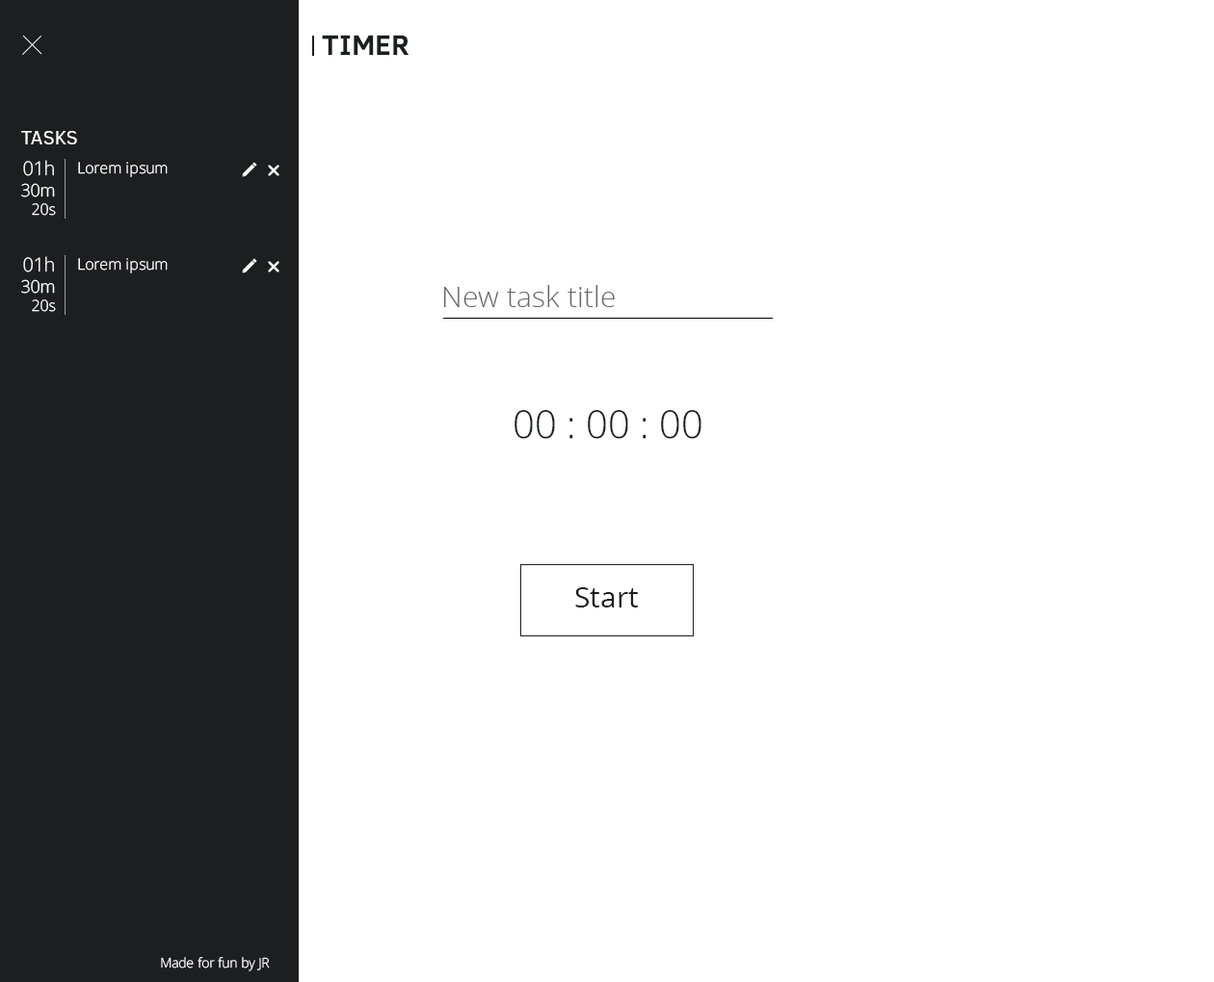
<style>
.page{position:relative;width:1214px;height:982px;background:#ffffff}
.page>*{position:absolute;margin:0}
.t1{font:28.9px "ClearSans-Bold";color:#1d1e1f;text-transform:uppercase}
.t2{font:19.3px "ClearSans";color:#ffffff;text-transform:uppercase}
.t3{font:19.3px "OpenSans-Light";color:#ffffff}
.t4{font:17.3px "OpenSans-Light";color:#ffffff}
.t5{font:15.4px "OpenSans-Light";color:#ffffff}
.t6{font:28.9px "OpenSans-Light";color:#686868}
.t7{font:38.5px "OpenSans-Light";color:#1d1e1f}
.t8{font:28.9px "OpenSans";color:#1d1e1f}
.t9{font:13.5px "OpenSans-Light";color:#ffffff}
</style>
<div class="page">
<p class="t1" style="left:322px;top:35px;width:87px;height:20px">Timer</p>
<p class="t2" style="left:21px;top:131px;width:56px;height:13px">Tasks</p>
<p class="t3" style="left:21px;top:160px;width:35px;height:56px;text-align:right">01h<br><span class="t4">30m<br></span><span class="t5">20s</span></p>
<p class="t5" style="left:78px;top:162px;width:90px;height:15px">Lorem ipsum</p>
<p class="t3" style="left:21px;top:256px;width:35px;height:56px;text-align:right">01h<br><span class="t4">30m<br></span><span class="t5">20s</span></p>
<p class="t5" style="left:78px;top:258px;width:90px;height:16px">Lorem ipsum</p>
<p class="t6" style="left:443px;top:285px;width:172px;height:22px">New task title</p>
<p class="t7" style="left:514px;top:409px;width:187px;height:30px">00 : 00 : 00</p>
<p class="t8" style="left:575px;top:588px;width:63px;height:20px">Start</p>
<p class="t9" style="left:161px;top:957px;width:109px;height:15px">Made for fun by JR</p>
</div>
